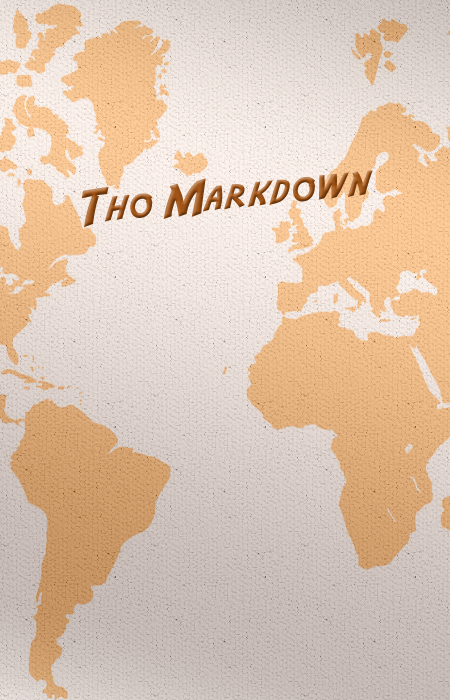
<style>
.page{position:relative;width:450px;height:700px}
.page>*{position:absolute;margin:0}
.t1{font:40px "AdventureNormal"}
.t2{font:50px "AdventureNormal";letter-spacing:-0.1em}
.t3{font:44px "AdventureNormal";letter-spacing:-0.075em}
</style>
<div class="page">
<p class="t1" style="left:81px;top:170px;width:292px;height:58px;rotate:-6deg"><span class="t2">T</span>ho <span class="t3">M</span>arkdown</p>
</div>
